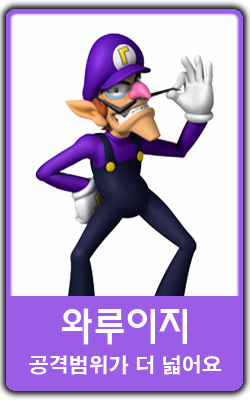
<style>
.page{position:relative;width:250px;height:400px;background:#fdfdfd}
.page>*{position:absolute;margin:0}
.t1{font:40px "MoeumTR-HM";color:#ffffff}
.t2{font:20px "H2gtrE";color:#ffffff}
</style>
<div class="page">
<p class="t1" style="left:61px;top:308px;width:126px;height:37px">와루이지</p>
<p class="t2" style="left:29px;top:355px;width:193px;height:20px">공격범위가 더 넓어요</p>
</div>
